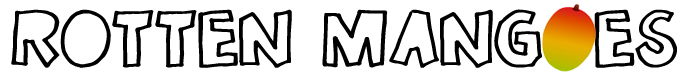
<style>
.page{position:relative;width:692px;height:81px;background:#ffffff}
.page>*{position:absolute;margin:0}
.t1{font:58.5px "Onceinawhile";color:#000000}
</style>
<div class="page">
<p class="t1" style="left:11px;top:9px;width:666px;height:59px">Rotten Mangoes</p>
</div>
